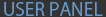
<style>
.page{position:relative;width:106px;height:17px;background:#333333}
.page>*{position:absolute;margin:0}
.t1{font:18px "KozGoPr6N-Regular";color:#6699cc}
</style>
<div class="page">
<p class="t1" style="left:4px;top:2px;width:99px;height:14px">USER PANEL</p>
</div>
